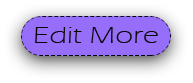
<style>
.page{position:relative;width:193px;height:83px}
.page>*{position:absolute;margin:0}
.t1{font:23.5px "ErasITC-Light";color:#090808;scale:1.34 1}
</style>
<div class="page">
<p class="t1" style="left:35px;top:27px;width:123px;height:16px">Edit More</p>
</div>
